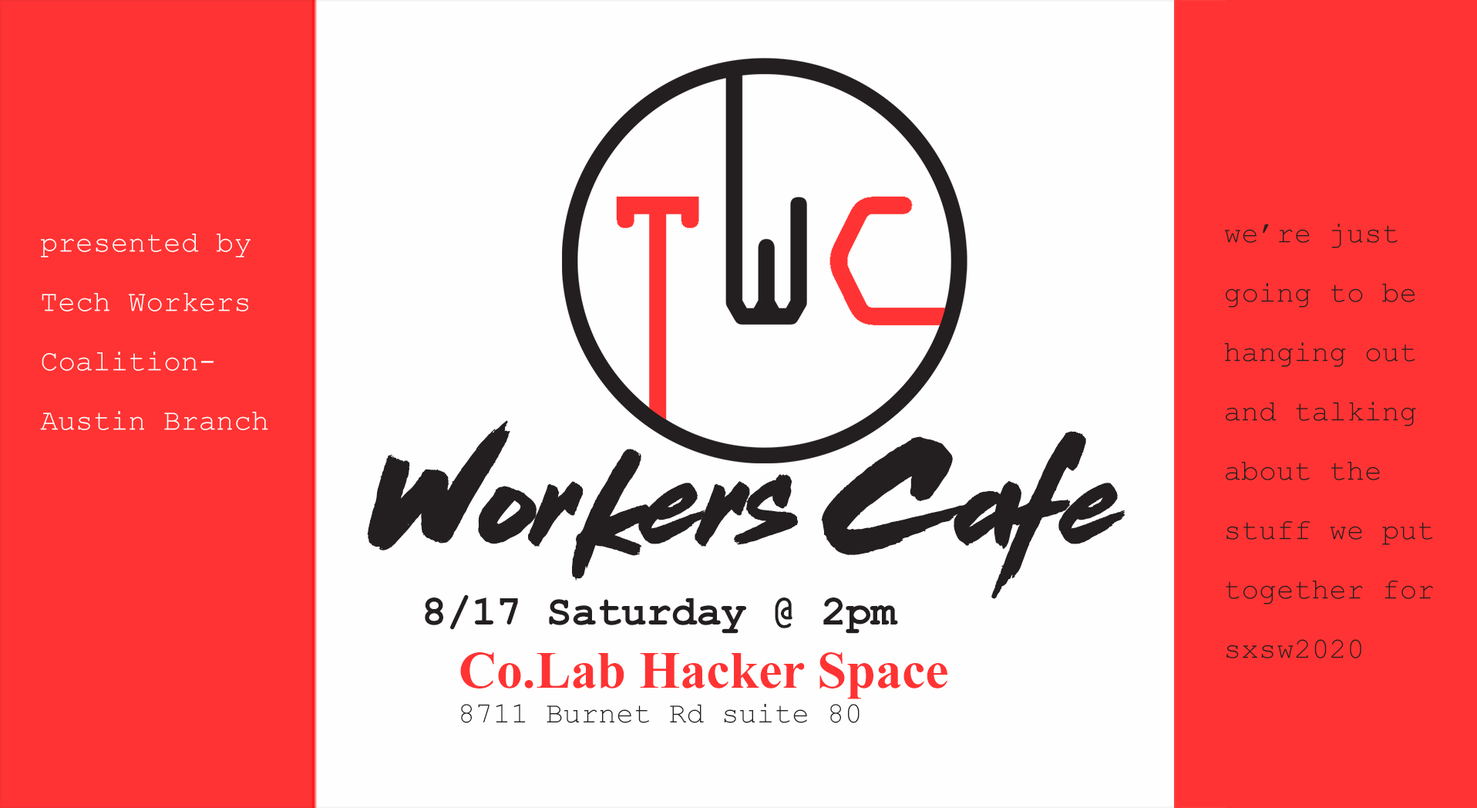
<style>
.page{position:relative;width:1477px;height:808px;background:#fefefe}
.page>*{position:absolute;margin:0}
.t1{font:29.3px/59.3px "CourierNewPSMT";color:#fefefe}
.t2{font:29.3px/59.3px "CourierNewPSMT";color:#231f20}
.t3{font:124.8px "DeadStock";color:#231f20}
.t4{font:148.7px "DeadStock";color:#231f20}
.t5{font:154.1px "DeadStock";color:#231f20}
.t6{font:158.7px "DeadStock";color:#231f20}
.t7{font:151.8px "DeadStock";color:#231f20}
.t8{font:41.6px "CourierNewPS-BoldMT";color:#231f20}
.t9{font:52.4px "TimesNewRomanPS-BoldMT";color:#ff3333}
.t10{font:29.3px "CourierNewPSMT";color:#231f20}
</style>
<div class="page">
<p class="t1" style="left:40px;top:233px;width:228px;height:197px">presented by Tech Workers Coalition- Austin Branch</p>
<p class="t2" style="left:1224px;top:223px;width:209px;height:435px">we’re just going to be hanging out and talking about the stuff we put together for sxsw2020</p>
<p class="t3" style="left:367px;top:420px;width:758px;height:179px"><span class="t4">W</span>or<span class="t5">k</span>ers <span class="t6">C</span>a<span class="t7">f</span>e</p>
<p class="t8" style="left:425px;top:594px;width:473px;height:39px">8/17 Saturday @ 2pm</p>
<p class="t9" style="left:460px;top:652px;width:487px;height:47px">Co.Lab Hacker Space</p>
<p class="t10" style="left:461px;top:704px;width:398px;height:19px">8711 Burnet Rd suite 80</p>
</div>
